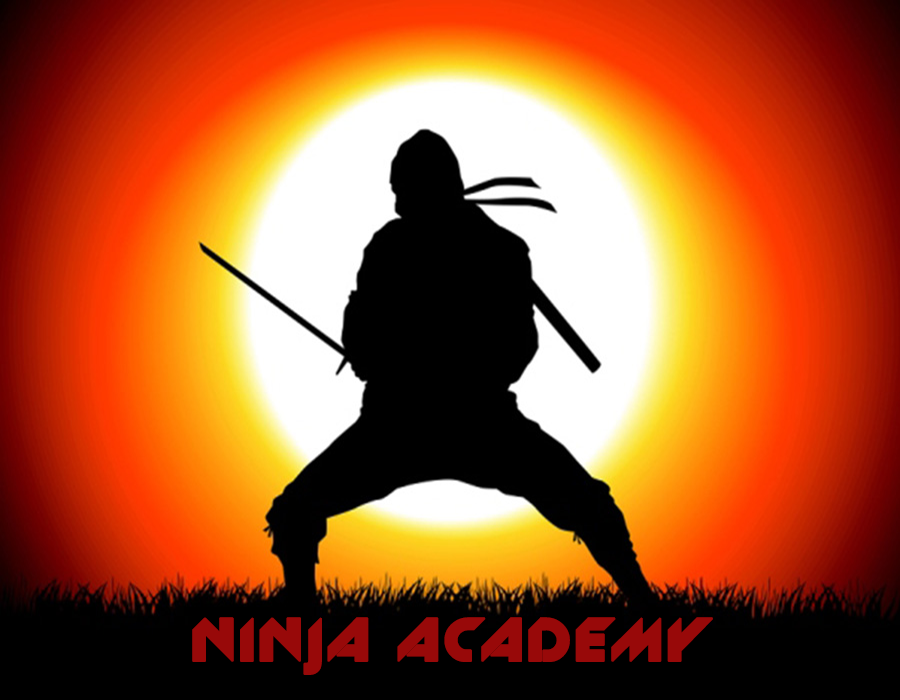
<style>
.page{position:relative;width:900px;height:700px}
.page>*{position:absolute;margin:0}
.t1{font:65px "Slant";letter-spacing:0.05em;color:#980909;text-transform:uppercase;font-weight:bold}
</style>
<div class="page">
<p class="t1" style="left:192px;top:617px;width:521px;height:58px">Ninja Academy</p>
</div>
